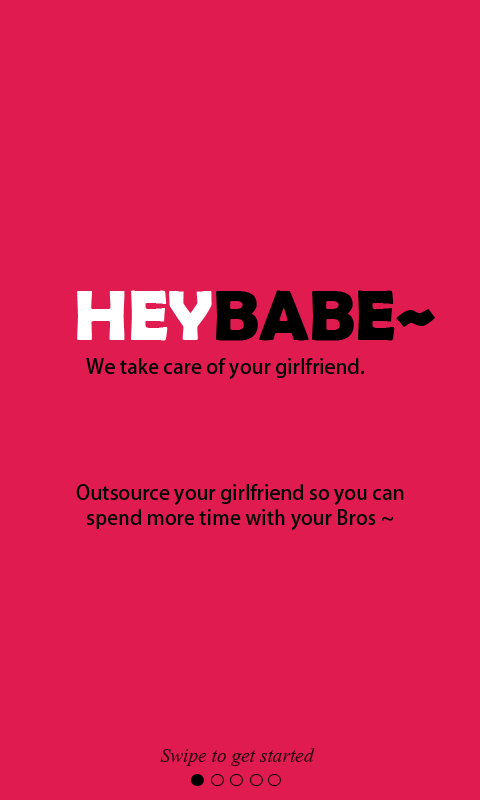
<style>
.page{position:relative;width:480px;height:800px;background:#e01b50}
.page>*{position:absolute;margin:0}
.t1{font:72px "BerlinSansFBDemi-Bold";color:#000000}
.t2{font:72px "BerlinSansFBDemi-Bold";color:#ffffff}
.t3{font:20px "AdobeFanHeitiStd-Bold";color:#000000}
.t4{font:20px/25px "AdobeFanHeitiStd-Bold";color:#000000}
.t5{font:24px "Vijaya";color:#2d0510}
</style>
<div class="page">
<p class="t1" style="left:77px;top:290px;width:358px;height:51px"><span class="t2">HEY</span>BABE~</p>
<p class="t3" style="left:86px;top:358px;width:278px;height:21px">We take care of your girlfriend.</p>
<p class="t4" style="left:76px;top:484px;width:328px;height:46px;text-align:center">Outsource your girlfriend so you can<br> spend more time with your Bros ~</p>
<p class="t5" style="left:160px;top:748px;width:155px;height:18px">Swipe to get started</p>
</div>
